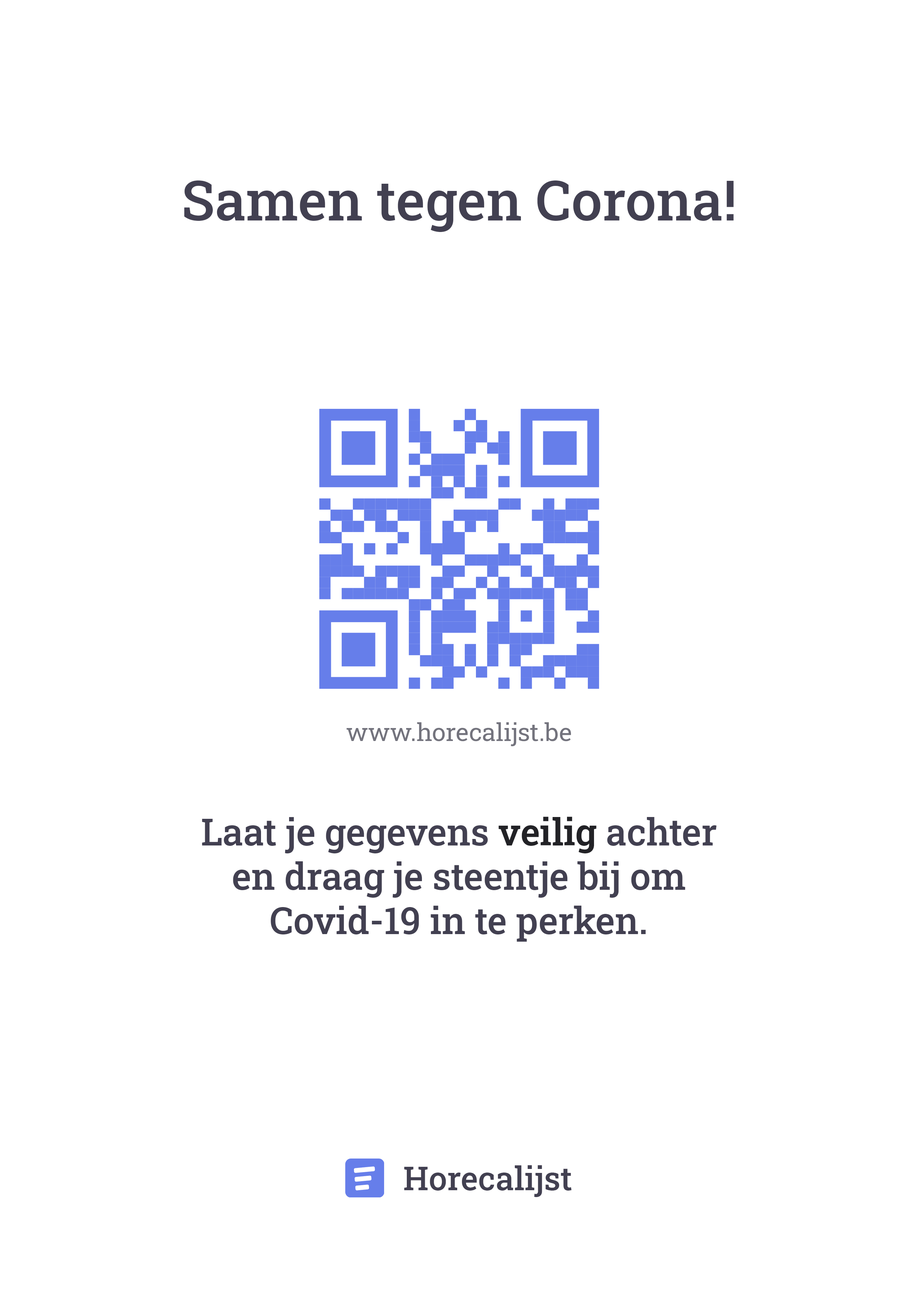
<style>
.page{position:relative;width:918px;height:1299px;background:#ffffff}
.page>*{position:absolute;margin:0}
.t1{font:55.5px "RobotoSlab-Medium";color:#424051}
.t2{font:24.7px "RobotoSlab-Regular";color:#73737d}
.t3{font:37px "RobotoSlab-Medium";color:#424051}
.t4{font:37px "RobotoSlab-SemiBold";color:#222226}
</style>
<div class="page">
<p class="t1" style="left:184px;top:180px;width:550px;height:52px">Samen tegen Corona!</p>
<p class="t2" style="left:346px;top:722px;width:225px;height:24px">www.horecalijst.be</p>
<p class="t3" style="left:202px;top:816px;width:515px;height:125px;text-align:center">Laat je gegevens <span class="t4">veilig </span>achter en draag je steentje bij om Covid-19 in te perken.</p>
</div>
